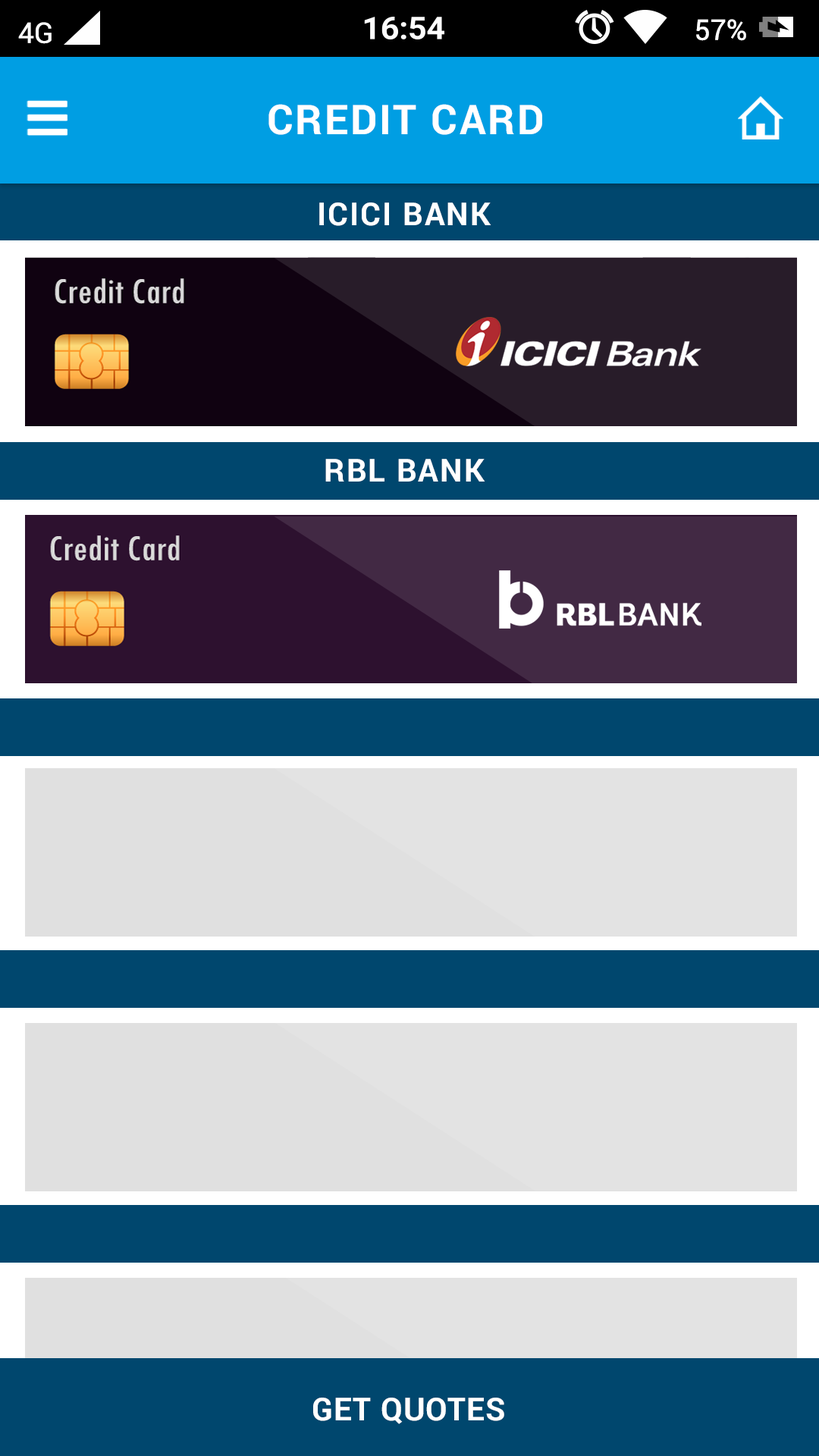
<style>
.page{position:relative;width:819px;height:1456px;background:#00476e}
.page>*{position:absolute;margin:0}
.t1{font:41.1px "Roboto-Bold";letter-spacing:0.05em;color:#ffffff}
.t2{font:31.6px "Roboto-Bold";letter-spacing:0.05em;color:#ffffff}
.t3{font:31.6px "Roboto-Bold";letter-spacing:0.025em;color:#ffffff;text-transform:uppercase}
</style>
<div class="page">
<p class="t1" style="left:268px;top:104px;width:274px;height:31px">CREDIT CARD</p>
<p class="t2" style="left:319px;top:202px;width:172px;height:24px">ICICI BANK</p>
<p class="t2" style="left:325px;top:459px;width:160px;height:23px">RBL BANK</p>
<p class="t3" style="left:313px;top:1398px;width:191px;height:26px">GET QUOTES</p>
</div>
